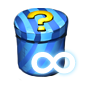
<style>
.page{position:relative;width:90px;height:90px;background:#ffffff}
.page>*{position:absolute;margin:0}
.t1{font:53.9px "SDKukdetopokki-aLt";color:#ffffff}
</style>
<div class="page">
<p class="t1" style="left:31px;top:52px;width:45px;height:22px">∞</p>
</div>
